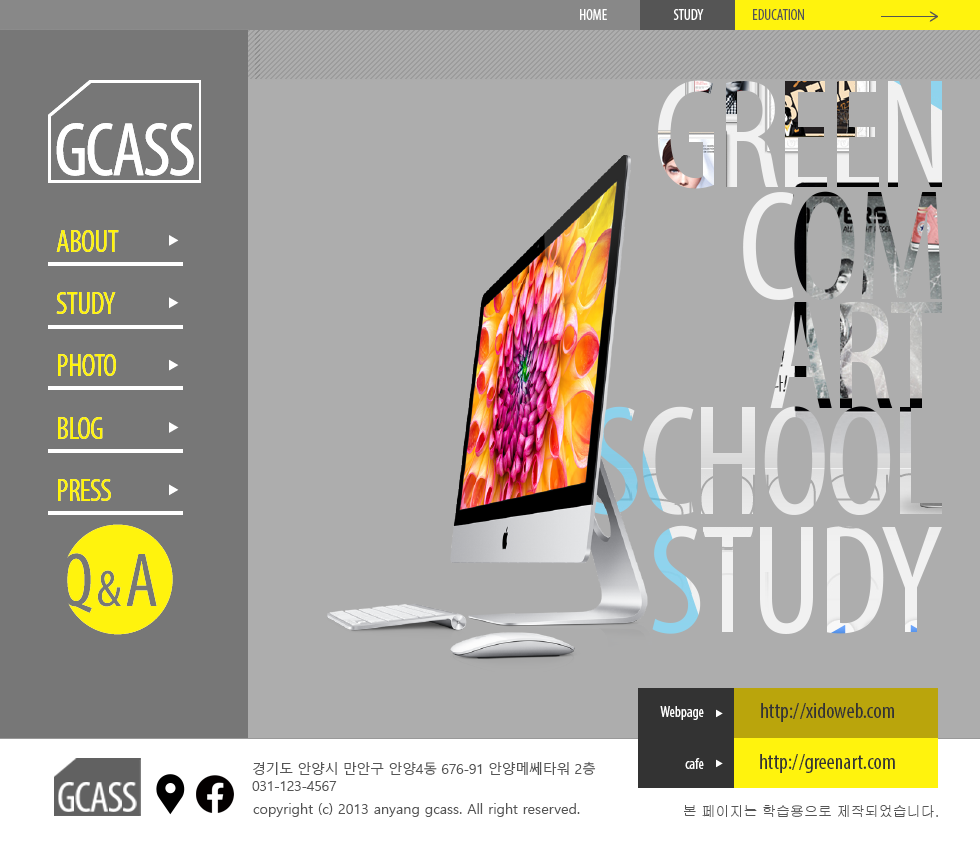
<style>
.page{position:relative;width:980px;height:850px;background:#adadad}
.page>*{position:absolute;margin:0}
.t1{font:15px "MyriadPro-Cond";color:#ffffff}
.t2{font:15px "MyriadPro-Cond";color:#555555}
.t3{font:31.5px "MyriadPro-Cond";letter-spacing:-0.03em;color:#fff30d}
.t4{font:22px "MyriadPro-Cond";color:#333333}
.t5{font:14px "MalgunGothic";letter-spacing:-0.025em;color:#555555}
.t6{font:14px "MalgunGothic";color:#555555}
.t7{font:14px "Gulim";color:#555555}
</style>
<div class="page">
<p class="t1" style="left:580px;top:9px;width:27px;height:11px">HOME</p>
<p class="t1" style="left:673px;top:9px;width:31px;height:11px">STUDY</p>
<p class="t2" style="left:753px;top:9px;width:51px;height:11px">EDUCATION</p>
<p class="t3" style="left:56px;top:230px;width:63px;height:22px">ABOUT</p>
<p class="t3" style="left:56px;top:230px;width:63px;height:22px">ABOUT</p>
<p class="t3" style="left:56px;top:292px;width:60px;height:22px">STUDY</p>
<p class="t3" style="left:56px;top:292px;width:60px;height:22px">STUDY</p>
<p class="t3" style="left:58px;top:354px;width:58px;height:22px">PHOTO</p>
<p class="t3" style="left:58px;top:354px;width:58px;height:22px">PHOTO</p>
<p class="t3" style="left:58px;top:417px;width:45px;height:22px">BLOG</p>
<p class="t3" style="left:58px;top:417px;width:45px;height:22px">BLOG</p>
<p class="t3" style="left:58px;top:479px;width:53px;height:22px">PRESS</p>
<p class="t3" style="left:58px;top:479px;width:53px;height:22px">PRESS</p>
<p class="t1" style="left:660px;top:706px;width:44px;height:14px">Webpage</p>
<p class="t4" style="left:761px;top:703px;width:133px;height:19px">http://xidoweb.com</p>
<p class="t5" style="left:252px;top:761px;width:344px;height:30px">경기도 안양시 만안구 안양4동 676-91 안양메쎄타워 2층<br>031-123-4567</p>
<p class="t1" style="left:685px;top:758px;width:19px;height:11px">cafe</p>
<p class="t4" style="left:760px;top:754px;width:135px;height:19px">http://greenart.com</p>
<p class="t6" style="left:253px;top:803px;width:327px;height:14px">copyright (c) 2013 anyang gcass. All right reserved.</p>
<p class="t7" style="left:684px;top:805px;width:254px;height:13px">본 페이지는 학습용으로 제작되었습니다.</p>
</div>
